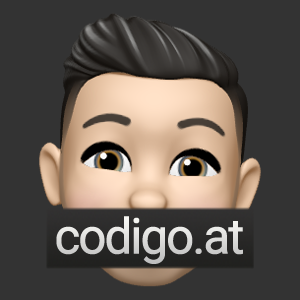
<style>
.page{position:relative;width:300px;height:300px;background:#333333}
.page>*{position:absolute;margin:0}
.t1{font:49.2px "Roboto-Regular";letter-spacing:-0.065em;color:#dcdcdc;font-weight:bold}
</style>
<div class="page">
<p class="t1" style="left:56px;top:216px;width:187px;height:48px">codigo.at</p>
</div>
